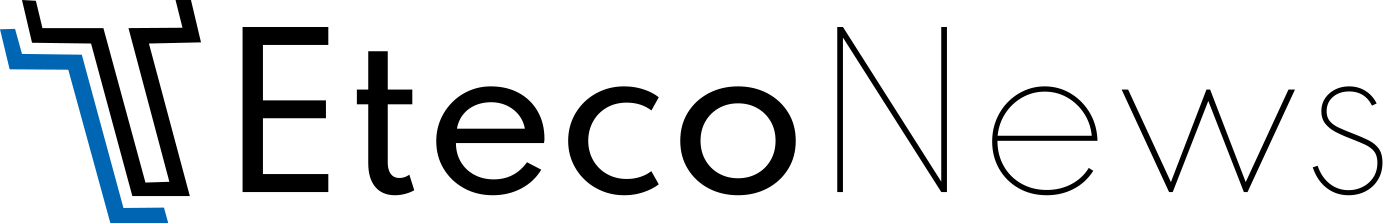
<style>
.page{position:relative;width:1383px;height:223px;background:#ffffff}
.page>*{position:absolute;margin:0}
.t1{font:200px "Spartan-Medium";color:#000000}
.t2{font:200px "Spartan-Thin";color:#000000}
</style>
<div class="page">
<p class="t1" style="left:242px;top:27px;width:1141px;height:169px">Eteco<span class="t2">News</span></p>
</div>
